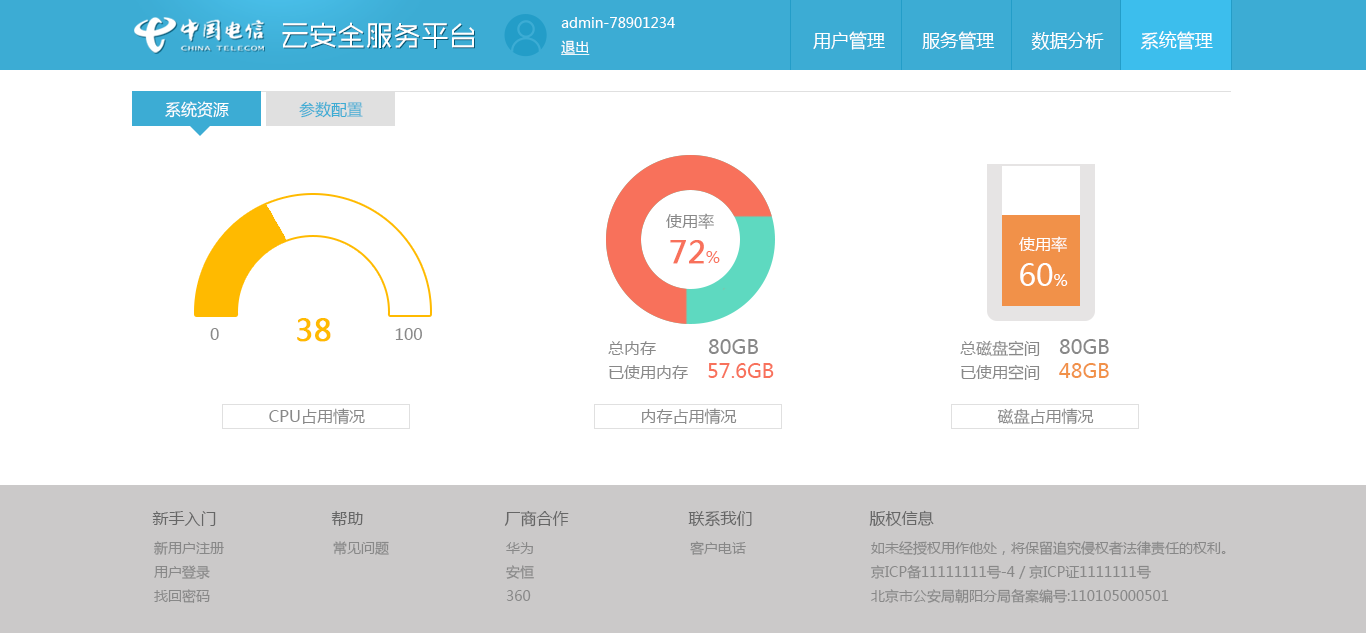
<style>
.page{position:relative;width:1366px;height:633px;background:#ffffff}
.page>*{position:absolute;margin:0}
.t1{font:14px/24px "MicrosoftYaHei";color:#ffffff}
.t2{font:14px/24px "MicrosoftYaHei";color:#ffffff;text-decoration:underline}
.t3{font:28px "MFShangHei_Noncommercial-Regular";color:#ffffff}
.t4{font:18px "MicrosoftYaHei";color:#ffffff}
.t5{font:16px "MicrosoftYaHei";color:#ffffff}
.t6{font:16px "MicrosoftYaHei";color:#3cacd4}
.t7{font:16px/24px "MicrosoftYaHei";color:#888888}
.t8{font:30px/24px "MicrosoftYaHei";color:#f8715b;font-weight:bold}
.t9{font:16px/24px "MicrosoftYaHei";color:#f8715b}
.t10{font:16px/24px "MicrosoftYaHei";color:#ffffff}
.t11{font:30px/24px "MicrosoftYaHei";color:#ffffff}
.t12{font:30px "MicrosoftYaHei";color:#ffba00;font-weight:bold}
.t13{font:16px "MicrosoftYaHei";color:#888888}
.t14{font:20px/24px "MicrosoftYaHei";color:#f8715b}
.t15{font:20px/24px "MicrosoftYaHei";color:#888888}
.t16{font:20px/24px "MicrosoftYaHei";color:#f19149}
.t17{font:16px "MicrosoftYaHei";color:#666666}
.t18{font:14px/24px "MicrosoftYaHei";color:#888888}
.t19{font:14px "MicrosoftYaHei";color:#888888}
</style>
<div class="page">
<p class="t1" style="left:561px;top:17px;width:114px;height:38px">admin-78901234<br><span class="t2">退出</span></p>
<p class="t3" style="left:282px;top:22px;width:192px;height:26px">云安全服务平台</p>
<p class="t4" style="left:813px;top:31px;width:400px;height:19px">用户管理       服务管理       数据分析       系统管理</p>
<p class="t5" style="left:165px;top:101px;width:64px;height:17px">系统资源</p>
<p class="t6" style="left:299px;top:101px;width:64px;height:17px">参数配置</p>
<p class="t7" style="left:666px;top:213px;width:54px;height:51px;text-align:center">使用率<br> <span class="t8">72</span><span class="t9">%</span></p>
<p class="t10" style="left:1019px;top:236px;width:49px;height:50px;text-align:center">使用率<br><span class="t11">60</span>%</p>
<p class="t12" style="left:297px;top:318px;width:34px;height:24px">38</p>
<p class="t13" style="left:210px;top:328px;width:212px;height:12px">0                                     100</p>
<p class="t14" style="left:608px;top:339px;width:166px;height:40px"><span class="t7">总内存           </span><span class="t15">80GB</span><span class="t7">        <br>已使用内存    </span>57.6GB</p>
<p class="t7" style="left:960px;top:339px;width:149px;height:41px">总磁盘空间    <span class="t15">80GB</span>        <br>已使用空间    <span class="t16">48GB</span></p>
<p class="t13" style="left:269px;top:408px;width:96px;height:17px">CPU占用情况</p>
<p class="t13" style="left:642px;top:408px;width:95px;height:16px">内存占用情况</p>
<p class="t13" style="left:997px;top:408px;width:97px;height:17px">磁盘占用情况</p>
<p class="t17" style="left:504px;top:510px;width:65px;height:17px">厂商合作</p>
<p class="t17" style="left:869px;top:510px;width:65px;height:16px">版权信息</p>
<p class="t17" style="left:152px;top:511px;width:64px;height:15px">新手入门</p>
<p class="t17" style="left:331px;top:511px;width:32px;height:15px">帮助</p>
<p class="t17" style="left:688px;top:511px;width:64px;height:16px">联系我们</p>
<p class="t18" style="left:154px;top:541px;width:70px;height:62px">新用户注册<br>用户登录<br>找回密码</p>
<p class="t19" style="left:333px;top:541px;width:56px;height:14px">常见问题</p>
<p class="t18" style="left:506px;top:542px;width:28px;height:59px">华为<br>安恒<br>360</p>
<p class="t19" style="left:690px;top:541px;width:56px;height:14px">客户电话</p>
<p class="t18" style="left:871px;top:541px;width:355px;height:63px">如未经授权用作他处，将保留追究侵权者法律责任的权利。<br>京ICP备11111111号-4 / 京ICP证1111111号<br>北京市公安局朝阳分局备案编号:110105000501</p>
</div>
